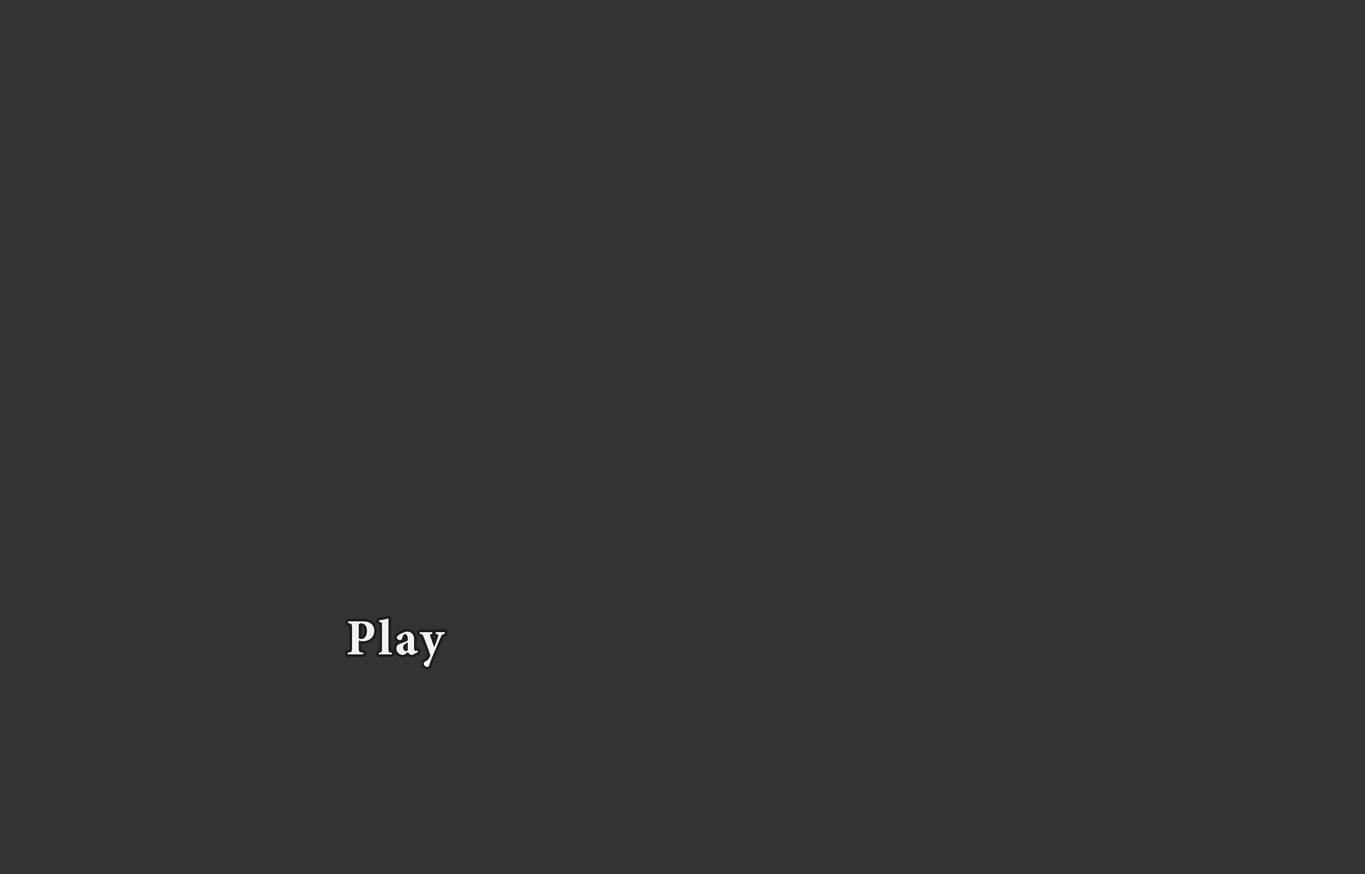
<style>
.page{position:relative;width:1365px;height:874px;background:#333333}
.page>*{position:absolute;margin:0}
.t1{font:50.6px "MinionPro-Bold";letter-spacing:0.05em;color:#f2f2f2}
</style>
<div class="page">
<p class="t1" style="left:348px;top:618px;width:97px;height:49px">Play</p>
</div>
